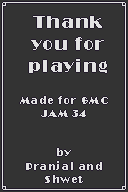
<style>
.page{position:relative;width:128px;height:192px;background:#333333}
.page>*{position:absolute;margin:0}
.t1{font:18px "Broadway";letter-spacing:0.05em;color:#e3e3e3}
.t2{font:11px "Broadway";letter-spacing:0.05em;color:#e3e3e3}
</style>
<div class="page">
<p class="t1" style="left:29px;top:16px;width:78px;height:57px;text-align:center">Thank you for playing</p>
<p class="t2" style="left:20px;top:96px;width:88px;height:87px;text-align:center">Made for GMC JAM 34<br><br><br>by<br>Pranjal and Shwet</p>
</div>
